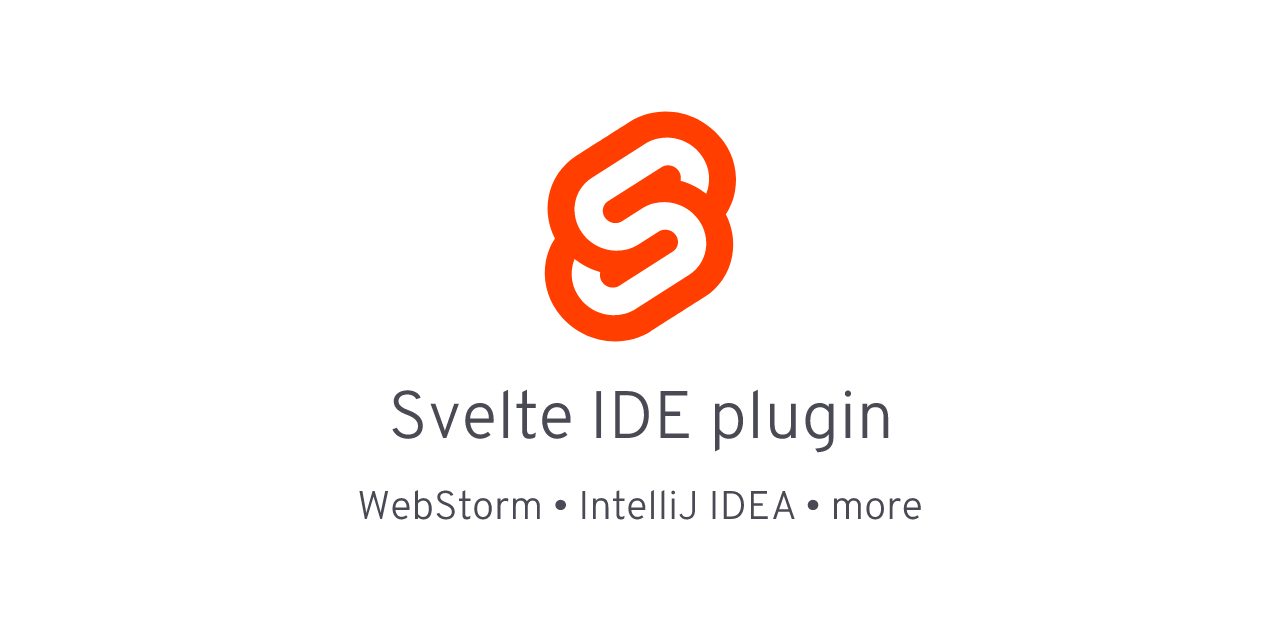
<style>
.page{position:relative;width:1280px;height:640px;background:#ffffff}
.page>*{position:absolute;margin:0}
.t1{font:67px "Overpass-Light";color:#4a4a55}
.t2{font:40px "Overpass-Light";color:#4a4a55}
</style>
<div class="page">
<p class="t1" style="left:392px;top:389px;width:497px;height:64px">Svelte IDE plugin</p>
<p class="t2" style="left:359px;top:490px;width:562px;height:30px">WebStorm • IntelliJ IDEA • more</p>
</div>
